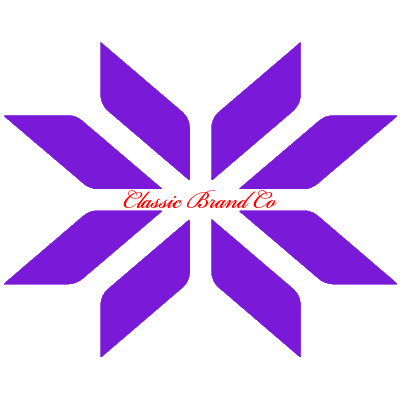
<style>
.page{position:relative;width:400px;height:400px;background:#ffffff}
.page>*{position:absolute;margin:0}
.t1{font:35.3px "BickhamScriptPro3";color:#fe0000}
</style>
<div class="page">
<p class="t1" style="left:123px;top:190px;width:154px;height:18px">Classic Brand Co</p>
</div>
